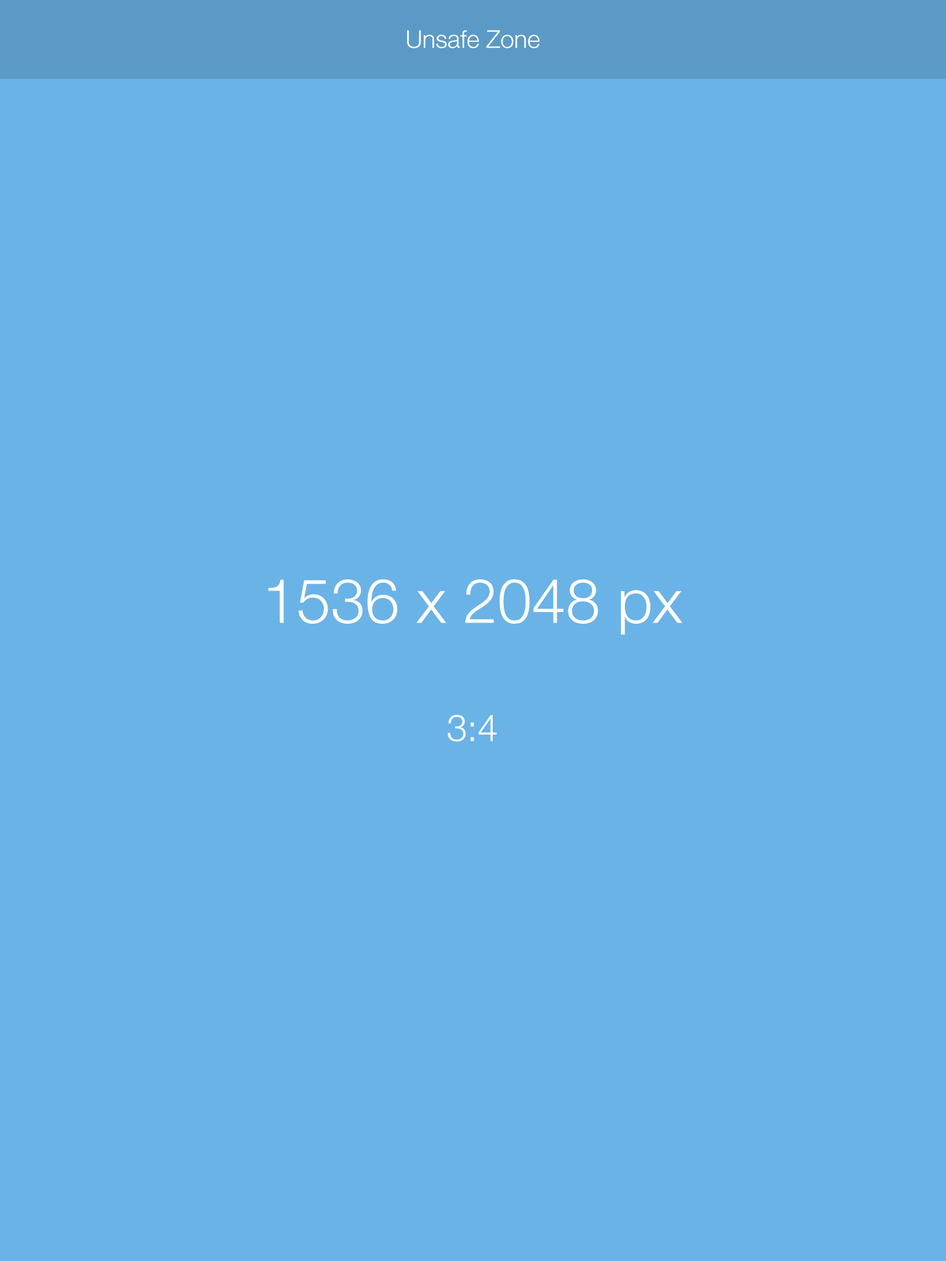
<style>
.page{position:relative;width:946px;height:1261px;background:#6ab3e6}
.page>*{position:absolute;margin:0}
.t1{font:24.6px "HelveticaNeue-Light";color:#ffffff}
.t2{font:61.6px "HelveticaNeue-Light";color:#ffffff}
.t3{font:36.9px "HelveticaNeue-Light";color:#ffffff}
</style>
<div class="page">
<p class="t1" style="left:407px;top:30px;width:132px;height:19px">Unsafe Zone</p>
<p class="t2" style="left:268px;top:579px;width:414px;height:163px;text-align:center">1536 x 2048 px<br><br><span class="t3">3:4</span></p>
</div>
